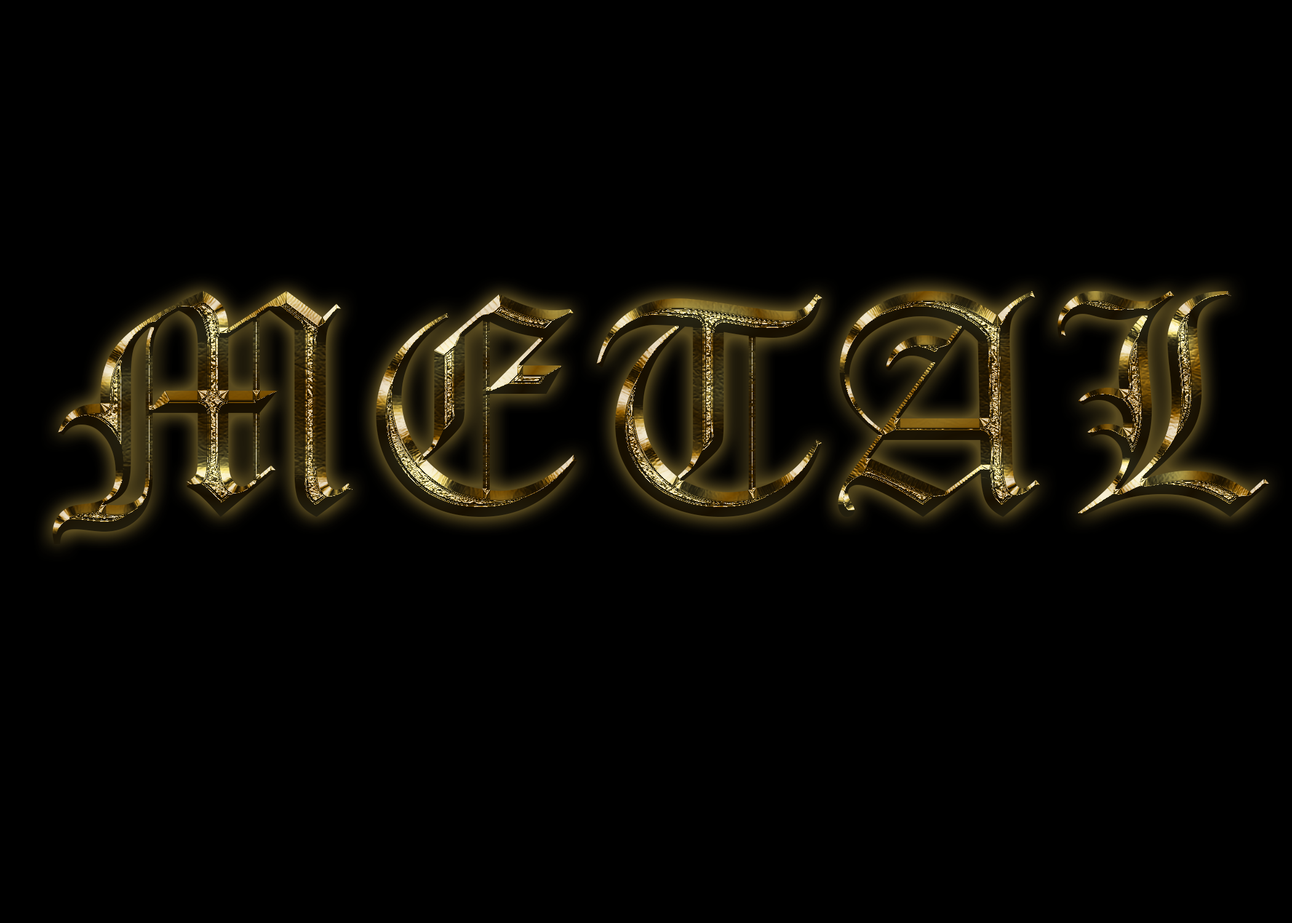
<style>
.page{position:relative;width:1292px;height:923px;background:#000000}
.page>*{position:absolute;margin:0}
.t1{font:305.3px "OldEnglishTextMT";letter-spacing:0.01em}
</style>
<div class="page">
<p class="t1" style="left:52px;top:291px;width:1217px;height:253px">METAL</p>
</div>
